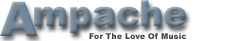
<style>
.page{position:relative;width:225px;height:41px;background:#ffffff}
.page>*{position:absolute;margin:0}
.t1{font:48px "Arial-Black";color:#72889a}
.t2{font:36px "Arial-Black";color:#72889a}
.t3{font:8px "Arial-Black";color:#3a3c3d}
</style>
<div class="page">
<p class="t1" style="left:0px;top:1px;width:38px;height:35px">A</p>
<p class="t2" style="left:34px;top:0px;width:152px;height:33px">mpache</p>
<p class="t3" style="left:89px;top:33px;width:98px;height:6px;opacity:0.96">For The Love Of Music</p>
</div>
